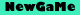
<style>
.page{position:relative;width:80px;height:15px;background:#3fefbb}
.page>*{position:absolute;margin:0}
.t1{font:12px "GillSans-UltraBold";color:#010101}
</style>
<div class="page">
<p class="t1" style="left:5px;top:1px;width:70px;height:11px">NewGaMe</p>
</div>
